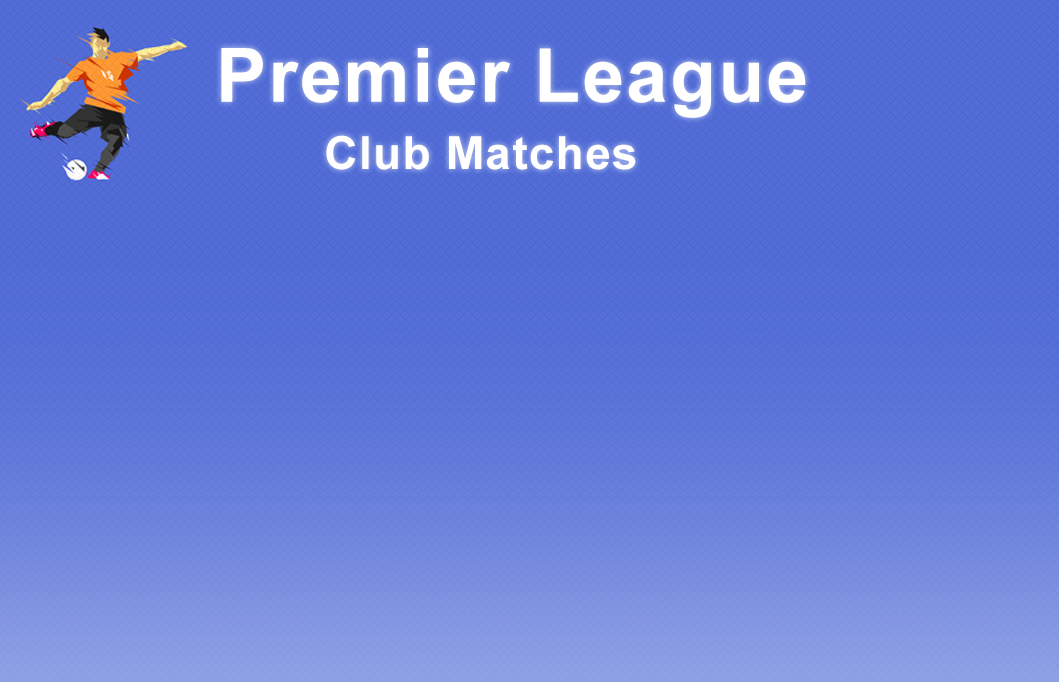
<style>
.page{position:relative;width:1059px;height:682px;background:#526dd8}
.page>*{position:absolute;margin:0}
.t1{font:75px "Arial-BoldMT";letter-spacing:0.03em;color:#ffffff}
.t2{font:45.8px "Arial-BoldMT";letter-spacing:0.03em;color:#ffffff}
</style>
<div class="page">
<p class="t1" style="left:221px;top:48px;width:585px;height:70px">Premier League</p>
<p class="t2" style="left:326px;top:135px;width:310px;height:35px">Club Matches</p>
</div>
